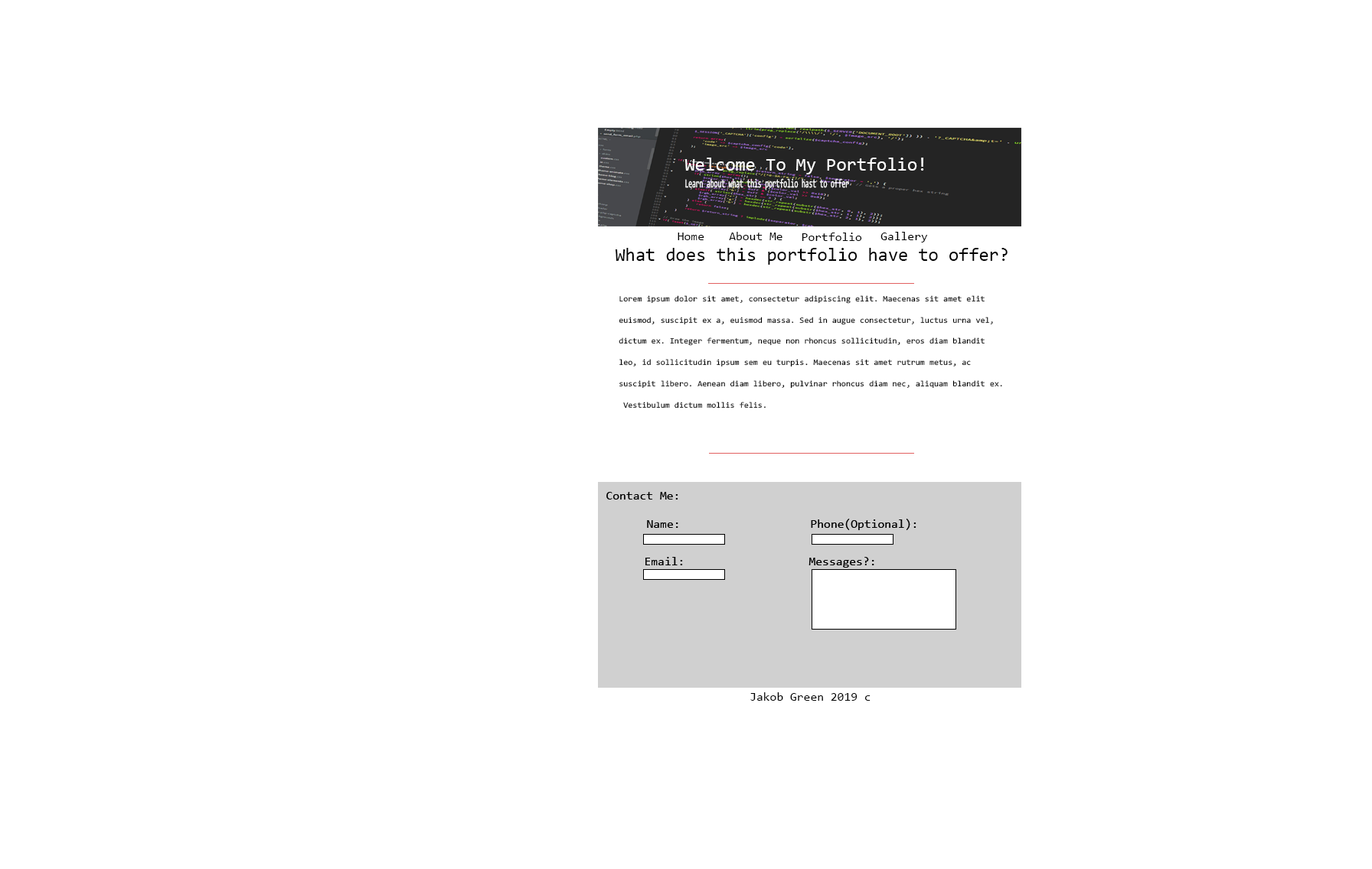
<style>
.page{position:relative;width:1372px;height:869px;background:#ffffff}
.page>*{position:absolute;margin:0}
.t1{font:18.4px "Consolas";color:#ffffff}
.t2{font:12.2px "Consolas";color:#ffffff;scale:0.54 1}
.t3{font:12.2px "Consolas";color:#000000}
.t4{font:18.4px "Consolas";color:#000000}
.t5{font:8px/21.2px "Consolas";color:#000000;scale:1.06 1}
</style>
<div class="page">
<p class="t1" style="left:684px;top:158px;width:240px;height:16px">Welcome To My Portfolio!</p>
<p class="t2" style="left:685px;top:178px;width:164px;height:13px">Learn about what this portfolio hast to offer</p>
<p class="t3" style="left:677px;top:233px;width:27px;height:7px">Home</p>
<p class="t3" style="left:729px;top:232px;width:53px;height:8px">About Me</p>
<p class="t3" style="left:801px;top:233px;width:61px;height:8px">Portfolio</p>
<p class="t3" style="left:880px;top:232px;width:48px;height:11px">Gallery</p>
<p class="t4" style="left:615px;top:248px;width:392px;height:17px">What does this portfolio have to offer?</p>
<p class="t5" style="left:618px;top:295px;width:384px;height:114px">Lorem ipsum dolor sit amet, consectetur adipiscing elit. Maecenas sit amet elit <br>euismod, suscipit ex a, euismod massa. Sed in augue consectetur, luctus urna vel, <br>dictum ex. Integer fermentum, neque non rhoncus sollicitudin, eros diam blandit <br>leo, id sollicitudin ipsum sem eu turpis. Maecenas sit amet rutrum metus, ac <br>suscipit libero. Aenean diam libero, pulvinar rhoncus diam nec, aliquam blandit ex.<br> Vestibulum dictum mollis felis.</p>
<p class="t3" style="left:606px;top:492px;width:72px;height:8px">Contact Me:</p>
<p class="t3" style="left:606px;top:492px;width:72px;height:8px">Contact Me:</p>
<p class="t3" style="left:647px;top:520px;width:31px;height:8px">Name:</p>
<p class="t3" style="left:647px;top:520px;width:31px;height:8px">Name:</p>
<p class="t3" style="left:811px;top:519px;width:105px;height:11px">Phone(Optional):</p>
<p class="t3" style="left:811px;top:519px;width:105px;height:11px">Phone(Optional):</p>
<p class="t3" style="left:645px;top:557px;width:38px;height:9px">Email:</p>
<p class="t3" style="left:645px;top:557px;width:38px;height:9px">Email:</p>
<p class="t3" style="left:808px;top:557px;width:66px;height:11px">Messages?:</p>
<p class="t3" style="left:808px;top:557px;width:66px;height:11px">Messages?:</p>
<p class="t3" style="left:750px;top:693px;width:120px;height:8px">Jakob Green 2019 c</p>
</div>
